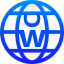
<style>
.page{position:relative;width:64px;height:64px;background:#ffffff}
.page>*{position:absolute;margin:0}
.t1{font:23.8px "MyriadPro-Bold";color:#054eff}
.t2{font:24px "MyriadPro-Bold";color:#054eff;scale:1.32 1}
</style>
<div class="page">
<p class="t1" style="left:23px;top:14px;width:18px;height:14px;rotate:-90deg">C</p>
<p class="t2" style="left:18px;top:30px;width:28px;height:17px">W</p>
</div>
